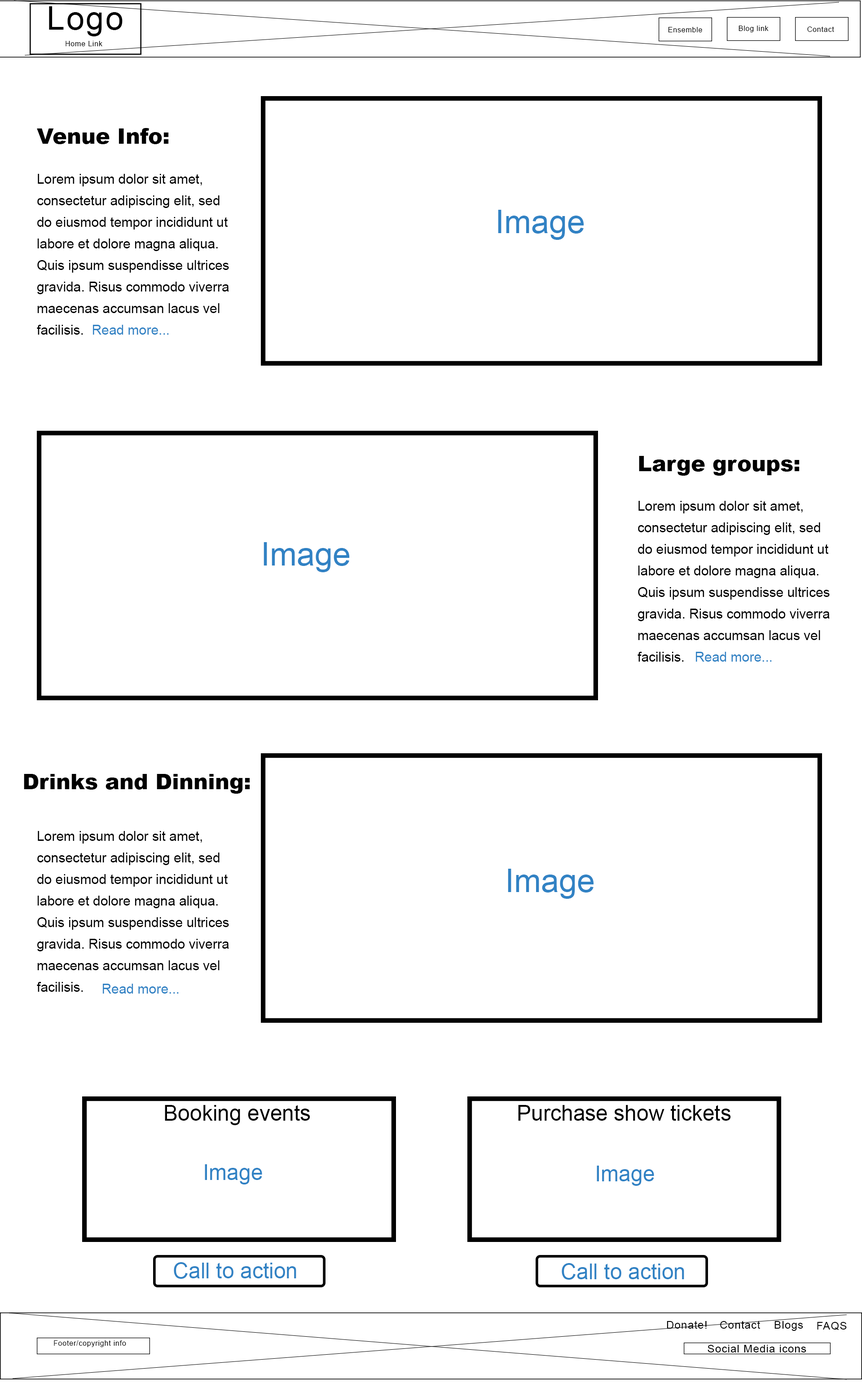
<style>
.page{position:relative;width:862px;height:1383px;background:#ffffff}
.page>*{position:absolute;margin:0}
.t1{font:32.3px "ArialMT";letter-spacing:0.05em;color:#000000}
.t2{font:7.2px "ArialMT";letter-spacing:0.05em;color:#000000}
.t3{font:21.6px "Arial-Black";color:#000000}
.t4{font:13.5px/21.6px "ArialMT";color:#000000}
.t5{font:32.3px "ArialMT";color:#3182c4}
.t6{font:13.5px "ArialMT";color:#3182c4}
.t7{font:21.6px "ArialMT";color:#000000}
.t8{font:21.6px "ArialMT";color:#3182c4}
.t9{font:10.8px "ArialMT";letter-spacing:0.05em;color:#000000}
</style>
<div class="page">
<p class="t1" style="left:49px;top:6px;width:74px;height:30px">Logo</p>
<p class="t2" style="left:668px;top:27px;width:34px;height:5px">Ensemble</p>
<p class="t2" style="left:739px;top:26px;width:30px;height:6px">Blog link</p>
<p class="t2" style="left:808px;top:26px;width:26px;height:6px">Contact</p>
<p class="t2" style="left:66px;top:41px;width:36px;height:5px">Home Link</p>
<p class="t3" style="left:37px;top:128px;width:132px;height:16px">Venue Info:</p>
<p class="t4" style="left:37px;top:174px;width:192px;height:161px">Lorem ipsum dolor sit amet, consectetur adipiscing elit, sed do eiusmod tempor incididunt ut labore et dolore magna aliqua. Quis ipsum suspendisse ultrices gravida. Risus commodo viverra maecenas accumsan lacus vel facilisis.</p>
<p class="t5" style="left:498px;top:210px;width:86px;height:30px">Image</p>
<p class="t6" style="left:93px;top:325px;width:76px;height:10px">Read more...</p>
<p class="t3" style="left:639px;top:456px;width:161px;height:20px">Large groups:</p>
<p class="t4" style="left:638px;top:501px;width:192px;height:161px">Lorem ipsum dolor sit amet, consectetur adipiscing elit, sed do eiusmod tempor incididunt ut labore et dolore magna aliqua. Quis ipsum suspendisse ultrices gravida. Risus commodo viverra maecenas accumsan lacus vel facilisis.</p>
<p class="t5" style="left:264px;top:542px;width:86px;height:30px">Image</p>
<p class="t6" style="left:696px;top:652px;width:76px;height:10px">Read more...</p>
<p class="t3" style="left:24px;top:774px;width:226px;height:20px">Drinks and Dinning:</p>
<p class="t4" style="left:37px;top:831px;width:192px;height:161px">Lorem ipsum dolor sit amet, consectetur adipiscing elit, sed do eiusmod tempor incididunt ut labore et dolore magna aliqua. Quis ipsum suspendisse ultrices gravida. Risus commodo viverra maecenas accumsan lacus vel facilisis.</p>
<p class="t5" style="left:508px;top:869px;width:86px;height:30px">Image</p>
<p class="t6" style="left:103px;top:984px;width:76px;height:9px">Read more...</p>
<p class="t7" style="left:165px;top:1105px;width:145px;height:20px">Booking events</p>
<p class="t7" style="left:518px;top:1105px;width:213px;height:16px">Purchase show tickets</p>
<p class="t8" style="left:205px;top:1164px;width:57px;height:20px">Image</p>
<p class="t8" style="left:597px;top:1165px;width:57px;height:21px">Image</p>
<p class="t8" style="left:174px;top:1262px;width:122px;height:17px">Call to action</p>
<p class="t8" style="left:562px;top:1263px;width:122px;height:17px">Call to action</p>
<p class="t9" style="left:667px;top:1320px;width:40px;height:8px">Donate!</p>
<p class="t9" style="left:720px;top:1320px;width:40px;height:8px">Contact</p>
<p class="t9" style="left:775px;top:1321px;width:28px;height:10px">Blogs</p>
<p class="t9" style="left:817px;top:1322px;width:30px;height:8px">FAQS</p>
<p class="t2" style="left:54px;top:1340px;width:72px;height:7px">Footer/copyright info</p>
<p class="t9" style="left:708px;top:1345px;width:99px;height:7px">Social Media icons</p>
</div>
